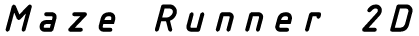
<style>
.page{position:relative;width:419px;height:36px;background:#ffffff}
.page>*{position:absolute;margin:0}
.t1{font:40px "ISOCTEURItalic";color:#000000;font-weight:bold}
</style>
<div class="page">
<p class="t1" style="left:5px;top:4px;width:408px;height:28px">Maze Runner 2D</p>
</div>
